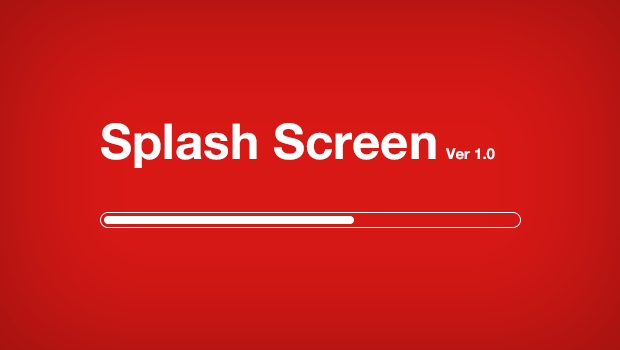
<style>
.page{position:relative;width:620px;height:350px}
.page>*{position:absolute;margin:0}
.t1{font:49.3px "HelveticaNeue-Bold";color:#ffffff}
.t2{font:15px "HelveticaNeue-Bold";color:#ffffff}
</style>
<div class="page">
<p class="t1" style="left:101px;top:123px;width:335px;height:45px">Splash Screen</p>
<p class="t2" style="left:446px;top:148px;width:49px;height:12px">Ver 1.0</p>
</div>
